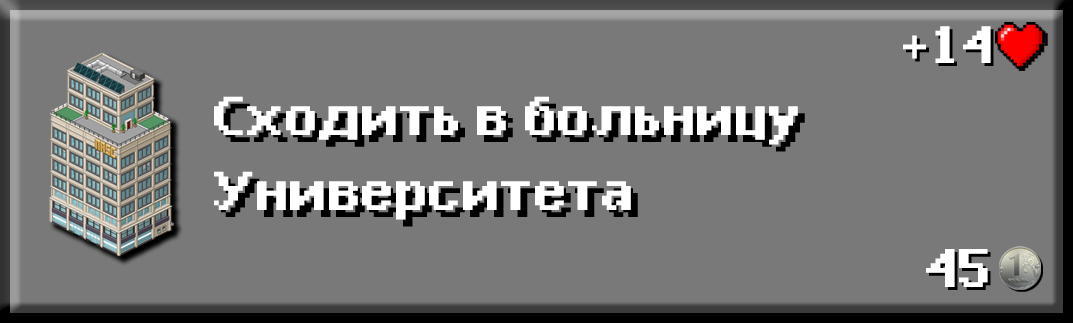
<style>
.page{position:relative;width:1073px;height:323px;background:#797979}
.page>*{position:absolute;margin:0}
.t1{font:59.7px "EpilepsySansBold";color:#ffffff}
.t2{font:62.2px "EpilepsySansBold";color:#ffffff}
.t3{font:61.8px "EpilepsySansBold";color:#ffffff}
</style>
<div class="page">
<p class="t1" style="left:903px;top:26px;width:88px;height:37px">+14</p>
<p class="t2" style="left:214px;top:96px;width:584px;height:124px">Сходить в больницу Университета</p>
<p class="t3" style="left:926px;top:249px;width:62px;height:38px">45</p>
</div>
